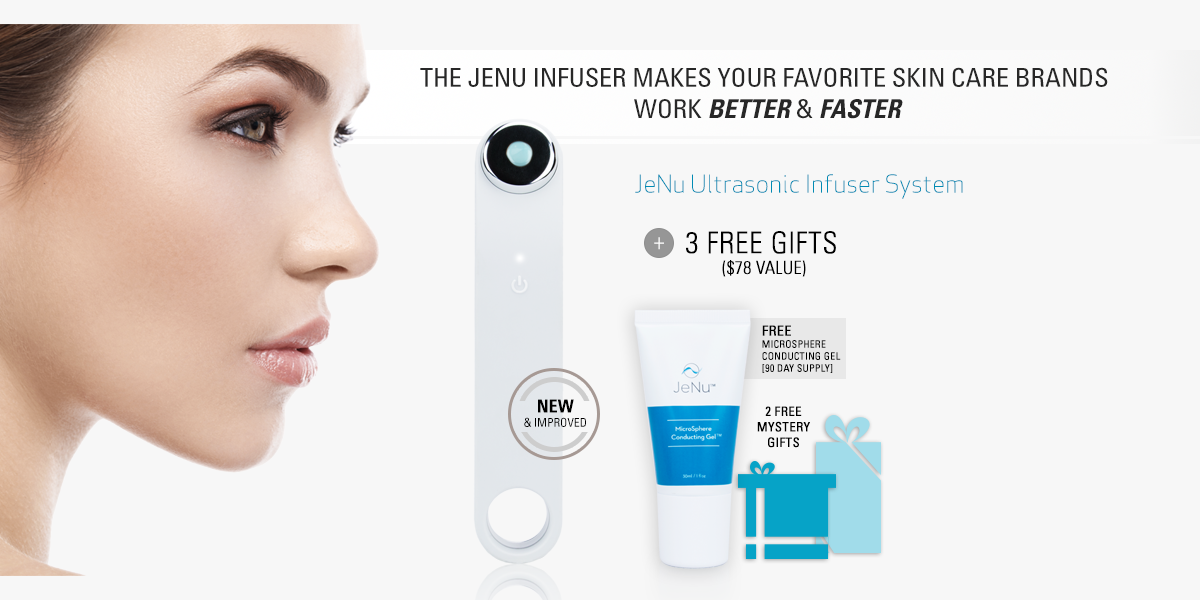
<style>
.page{position:relative;width:1200px;height:600px;background:#f7f7f7}
.page>*{position:absolute;margin:0}
.t1{font:26px "UniversLTStd-Cn";color:#272727;text-transform:uppercase}
.t2{font:26px "UniversLTStd-BoldCnObl";color:#272727;text-transform:uppercase}
.t3{font:24px "ApexSansLightST";color:#008bb4}
.t4{font:30px "UniversLTStd-LightCn";color:#000000;text-transform:uppercase;font-weight:bold}
.t5{font:24px "UniversLTStd-LightCn";color:#ffffff}
.t6{font:18px "UniversLTStd-LightCn";color:#000000;text-transform:uppercase;font-weight:bold}
.t7{font:10px/12px "UniversLTStd-Cn";color:#000000;text-transform:uppercase;font-weight:bold}
.t8{font:14px/12px "UniversLTStd-Cn";color:#000000;text-transform:uppercase;font-weight:bold}
.t9{font:12px "UniversLTStd-Cn";letter-spacing:-0.01em;color:#000000;text-transform:uppercase}
.t10{font:18px "UniversLTStd-BoldCn";color:#000000;text-transform:uppercase}
.t11{font:13px "UniversLTStd-Cn";color:#000000;text-transform:uppercase;font-weight:bold}
</style>
<div class="page">
<p class="t1" style="left:420px;top:67px;width:688px;height:52px;text-align:center">THE JENU INFUSER MAKES your favorite skin care brands <br>work <span class="t2">better</span> &amp; <span class="t2">faster</span></p>
<p class="t3" style="left:635px;top:174px;width:328px;height:25px">JeNu Ultrasonic Infuser System</p>
<p class="t4" style="left:686px;top:231px;width:150px;height:23px">3 free gifts</p>
<p class="t5" style="left:654px;top:237px;width:10px;height:13px">+</p>
<p class="t6" style="left:722px;top:260px;width:84px;height:17px">($78 Value)</p>
<p class="t7" style="left:762px;top:325px;width:79px;height:48px"><span class="t8">FREE<br></span>Microsphere <br>Conducting Gel<br>[90 Day Supply]</p>
<p class="t9" style="left:524px;top:399px;width:62px;height:28px;text-align:center"><span class="t10">New<br></span>&amp; Improved</p>
<p class="t11" style="left:757px;top:406px;width:53px;height:42px;text-align:center">2 Free<br>Mystery<br>Gifts</p>
</div>
